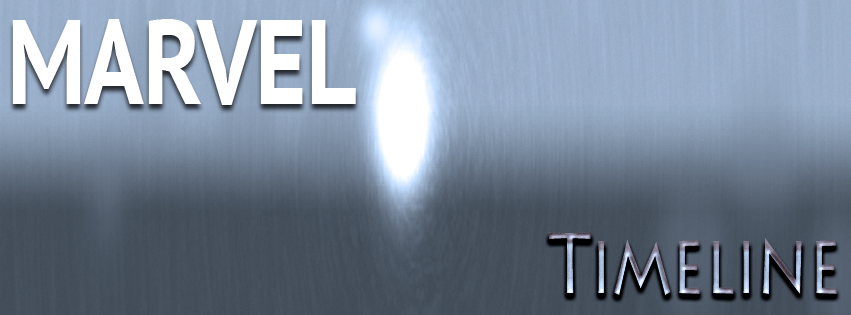
<style>
.page{position:relative;width:851px;height:315px}
.page>*{position:absolute;margin:0}
.t1{font:119.9px "PTSans-CaptionBold";letter-spacing:-0.01em;color:#ffffff;scale:0.76 1}
.t2{font:87px "LithosPro-Regular";letter-spacing:-0.01em;scale:0.74 1}
</style>
<div class="page">
<p class="t1" style="left:12px;top:19px;width:344px;height:86px">MARVEL</p>
<p class="t2" style="left:549px;top:232px;width:288px;height:63px">Timeline</p>
</div>
